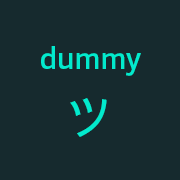
<style>
.page{position:relative;width:180px;height:180px;background:#162a2e}
.page>*{position:absolute;margin:0}
.t1{font:30px "AdelleSansDevanagari-Semibold";color:#02eacd}
.t2{font:48px "ArialUnicodeMS";color:#02eacd}
.t3{font:30px "NotoSansJavanese-Regular";color:#02eacd}
</style>
<div class="page">
<p class="t1" style="left:41px;top:46px;width:100px;height:30px">dummy</p>
<p class="t1" style="left:41px;top:46px;width:100px;height:30px">dummy</p>
<p class="t2" style="left:70px;top:98px;width:37px;height:39px"><span class="t3"><br></span>ツ</p>
<p class="t2" style="left:70px;top:98px;width:37px;height:39px"><span class="t3"><br></span>ツ</p>
</div>
